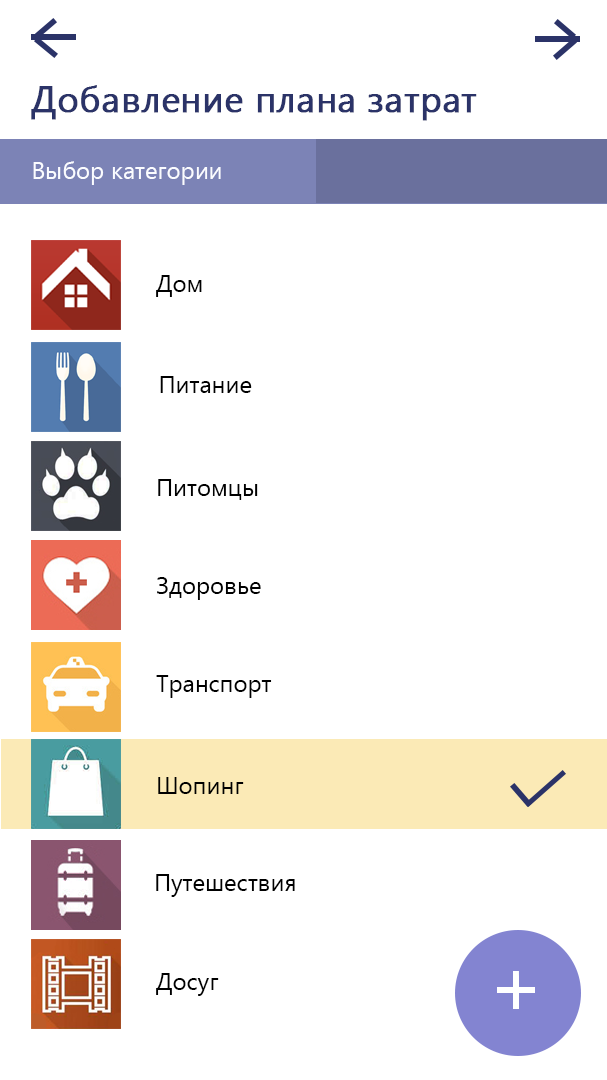
<style>
.page{position:relative;width:607px;height:1080px;background:#ffffff}
.page>*{position:absolute;margin:0}
.t1{font:36px "YuGothicUI-Regular";color:#2b3368;font-weight:bold}
.t2{font:24px "YuGothicUI-Regular";color:#fbfcff}
.t3{font:24px "YuGothicUI-Regular";color:#000000}
</style>
<div class="page">
<p class="t1" style="left:31px;top:85px;width:446px;height:36px">Добавление плана затрат</p>
<p class="t2" style="left:33px;top:161px;width:188px;height:24px">Выбор категории</p>
<p class="t3" style="left:156px;top:275px;width:46px;height:22px">Дом</p>
<p class="t3" style="left:160px;top:376px;width:92px;height:17px">Питание</p>
<p class="t3" style="left:158px;top:479px;width:100px;height:21px">Питомцы</p>
<p class="t3" style="left:157px;top:577px;width:104px;height:23px">Здоровье</p>
<p class="t3" style="left:156px;top:675px;width:116px;height:23px">Транспорт</p>
<p class="t3" style="left:158px;top:777px;width:86px;height:17px">Шопинг</p>
<p class="t3" style="left:156px;top:874px;width:139px;height:23px">Путешествия</p>
<p class="t3" style="left:156px;top:973px;width:63px;height:23px">Досуг</p>
</div>
